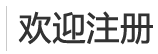
<style>
.page{position:relative;width:158px;height:54px;background:#ffffff}
.page>*{position:absolute;margin:0}
.t1{font:33px "MicrosoftYaHei";color:#323232;font-weight:bold}
</style>
<div class="page">
<p class="t1" style="left:18px;top:11px;width:135px;height:34px">欢迎注册</p>
</div>
